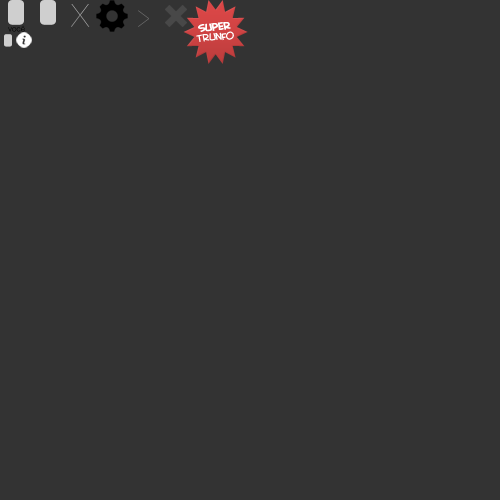
<style>
.page{position:relative;width:500px;height:500px;background:#333333}
.page>*{position:absolute;margin:0}
.t1{font:32px "HelveticaNeue-UltraLight";letter-spacing:-0.01em}
.t2{font:32px "HelveticaNeue-UltraLight";letter-spacing:-0.01em;scale:0.65 1}
.t3{font:8px "Helvetica-Light";letter-spacing:-0.01em;color:#000000}
.t4{font:12px/10px "CreativeBlockBB";letter-spacing:-0.05em;color:#ffffff}
.t5{font:12px/10px "CreativeBlockBB";letter-spacing:-0.05em;color:#ffffff;font-weight:bold}
</style>
<div class="page">
<p class="t1" style="left:71px;top:4px;width:19px;height:23px">X</p>
<p class="t2" style="left:138px;top:10px;width:11px;height:17px">&gt;</p>
<p class="t3" style="left:8px;top:25px;width:17px;height:7px">você</p>
<p class="t4" style="left:196px;top:22px;width:38px;height:20px;text-align:center;rotate:-5deg"><span class="t5">super<br></span>trunfo</p>
</div>
